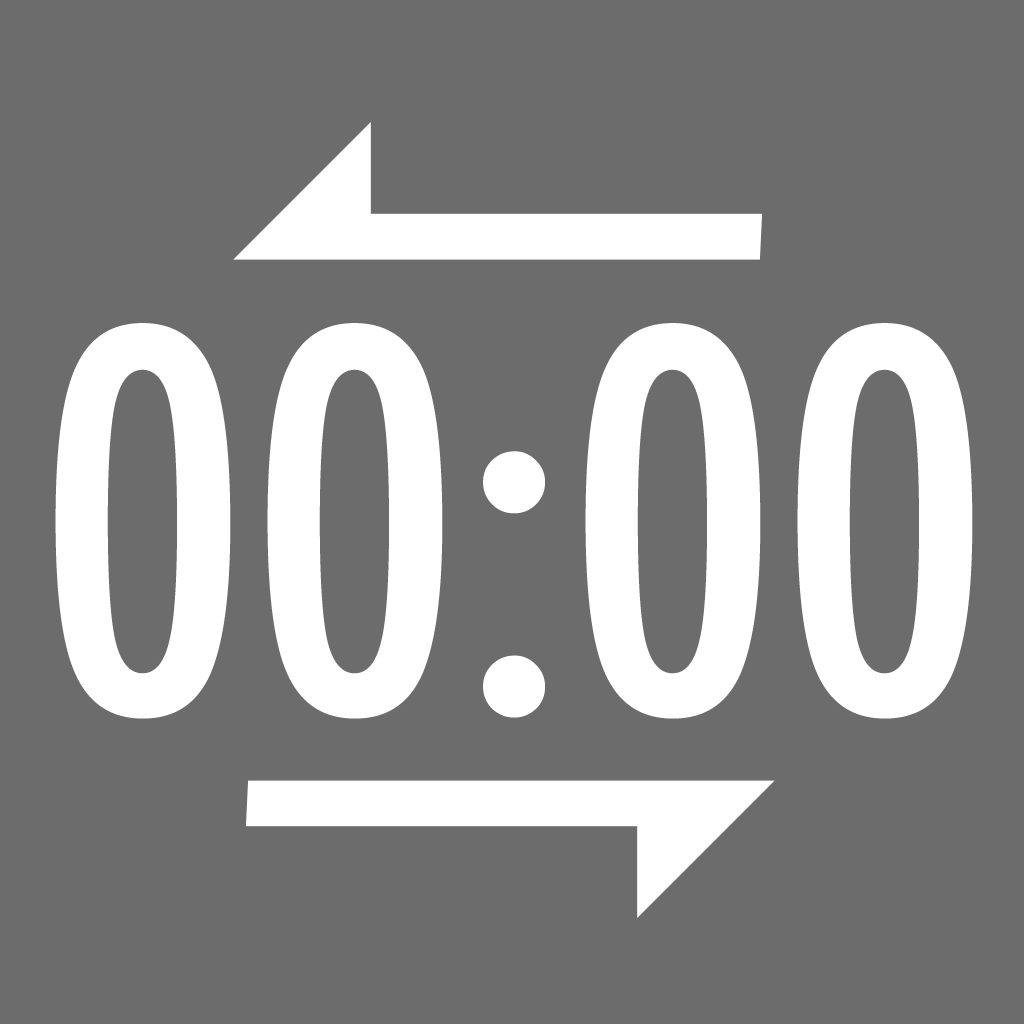
<style>
.page{position:relative;width:1024px;height:1024px;background:#6c6c6c}
.page>*{position:absolute;margin:0}
.t1{font:512px "Futura-CondensedMedium";color:#ffffff}
</style>
<div class="page">
<p class="t1" style="left:55px;top:323px;width:918px;height:396px">00:00</p>
</div>
